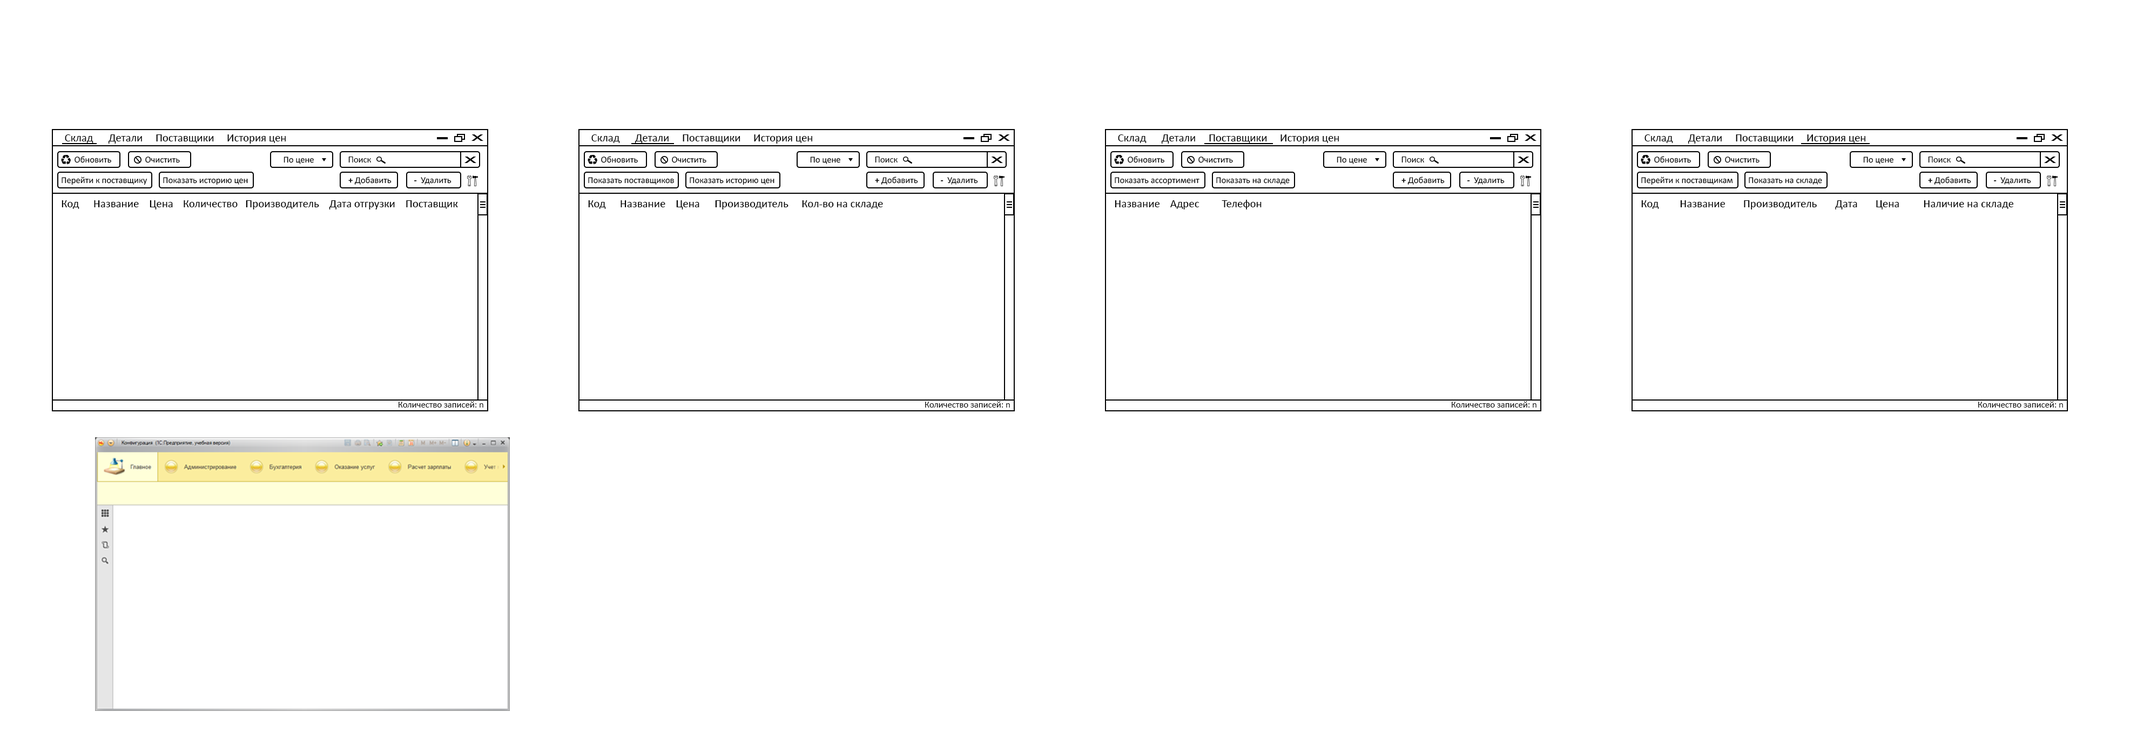
<style>
.page{position:relative;width:2130px;height:732px;background:#ffffff}
.page>*{position:absolute;margin:0}
.t1{font:11.2px "Calibri";color:#000000}
.t2{font:9px "Calibri";color:#000000}
.t3{font:9px "Calibri-Bold";color:#000000}
</style>
<div class="page">
<p class="t1" style="left:65px;top:134px;width:221px;height:10px">Склад   Детали     Поставщики     История цен</p>
<p class="t1" style="left:591px;top:134px;width:221px;height:10px">Склад   Детали     Поставщики     История цен</p>
<p class="t1" style="left:1118px;top:134px;width:221px;height:10px">Склад   Детали     Поставщики     История цен</p>
<p class="t1" style="left:1644px;top:134px;width:221px;height:10px">Склад   Детали     Поставщики     История цен</p>
<p class="t2" style="left:75px;top:156px;width:36px;height:7px">Обновить</p>
<p class="t2" style="left:145px;top:157px;width:35px;height:6px">Очистить</p>
<p class="t2" style="left:283px;top:157px;width:31px;height:7px">По цене</p>
<p class="t2" style="left:348px;top:157px;width:23px;height:6px">Поиск</p>
<p class="t2" style="left:601px;top:156px;width:37px;height:7px">Обновить</p>
<p class="t2" style="left:672px;top:157px;width:34px;height:6px">Очистить</p>
<p class="t2" style="left:810px;top:157px;width:30px;height:7px">По цене</p>
<p class="t2" style="left:875px;top:157px;width:22px;height:6px">Поиск</p>
<p class="t2" style="left:1128px;top:156px;width:36px;height:7px">Обновить</p>
<p class="t2" style="left:1198px;top:157px;width:35px;height:6px">Очистить</p>
<p class="t2" style="left:1336px;top:157px;width:31px;height:7px">По цене</p>
<p class="t2" style="left:1401px;top:157px;width:23px;height:6px">Поиск</p>
<p class="t2" style="left:1654px;top:156px;width:37px;height:7px">Обновить</p>
<p class="t2" style="left:1725px;top:157px;width:34px;height:6px">Очистить</p>
<p class="t2" style="left:1863px;top:157px;width:30px;height:7px">По цене</p>
<p class="t2" style="left:1928px;top:157px;width:22px;height:6px">Поиск</p>
<p class="t2" style="left:62px;top:177px;width:85px;height:8px">Перейти к поставщику</p>
<p class="t2" style="left:163px;top:177px;width:85px;height:8px">Показать историю цен</p>
<p class="t2" style="left:348px;top:177px;width:43px;height:8px"><span class="t3">+ </span>Добавить</p>
<p class="t2" style="left:414px;top:177px;width:37px;height:8px"><span class="t3">-  </span>Удалить</p>
<p class="t2" style="left:588px;top:177px;width:86px;height:8px">Показать поставщиков</p>
<p class="t2" style="left:690px;top:177px;width:84px;height:8px">Показать историю цен</p>
<p class="t2" style="left:875px;top:177px;width:43px;height:8px"><span class="t3">+ </span>Добавить</p>
<p class="t2" style="left:941px;top:177px;width:37px;height:8px"><span class="t3">-  </span>Удалить</p>
<p class="t2" style="left:1115px;top:177px;width:84px;height:8px">Показать ассортимент</p>
<p class="t2" style="left:1216px;top:177px;width:74px;height:8px">Показать на складе</p>
<p class="t2" style="left:1401px;top:177px;width:43px;height:8px"><span class="t3">+ </span>Добавить</p>
<p class="t2" style="left:1467px;top:177px;width:37px;height:8px"><span class="t3">-  </span>Удалить</p>
<p class="t2" style="left:1641px;top:177px;width:92px;height:8px">Перейти к поставщикам</p>
<p class="t2" style="left:1749px;top:177px;width:73px;height:8px">Показать на складе</p>
<p class="t2" style="left:1928px;top:177px;width:43px;height:8px"><span class="t3">+ </span>Добавить</p>
<p class="t2" style="left:1994px;top:177px;width:37px;height:8px"><span class="t3">-  </span>Удалить</p>
<p class="t1" style="left:62px;top:200px;width:396px;height:10px">Код      Название    Цена   Количество   Производитель    Дата отгрузки    Поставщик</p>
<p class="t1" style="left:588px;top:200px;width:295px;height:10px">Код      Название    Цена     Производитель Кол-во на складе</p>
<p class="t1" style="left:1115px;top:200px;width:146px;height:10px">Название    Адрес     Телефон</p>
<p class="t1" style="left:1641px;top:200px;width:372px;height:10px">Код  Название       Производитель Дата       Цена     Наличие на складе</p>
<p class="t2" style="left:399px;top:401px;width:84px;height:7px">Количество записей: n</p>
<p class="t2" style="left:925px;top:401px;width:85px;height:7px">Количество записей: n</p>
<p class="t2" style="left:1452px;top:401px;width:84px;height:7px">Количество записей: n</p>
<p class="t2" style="left:1978px;top:401px;width:85px;height:7px">Количество записей: n</p>
</div>
